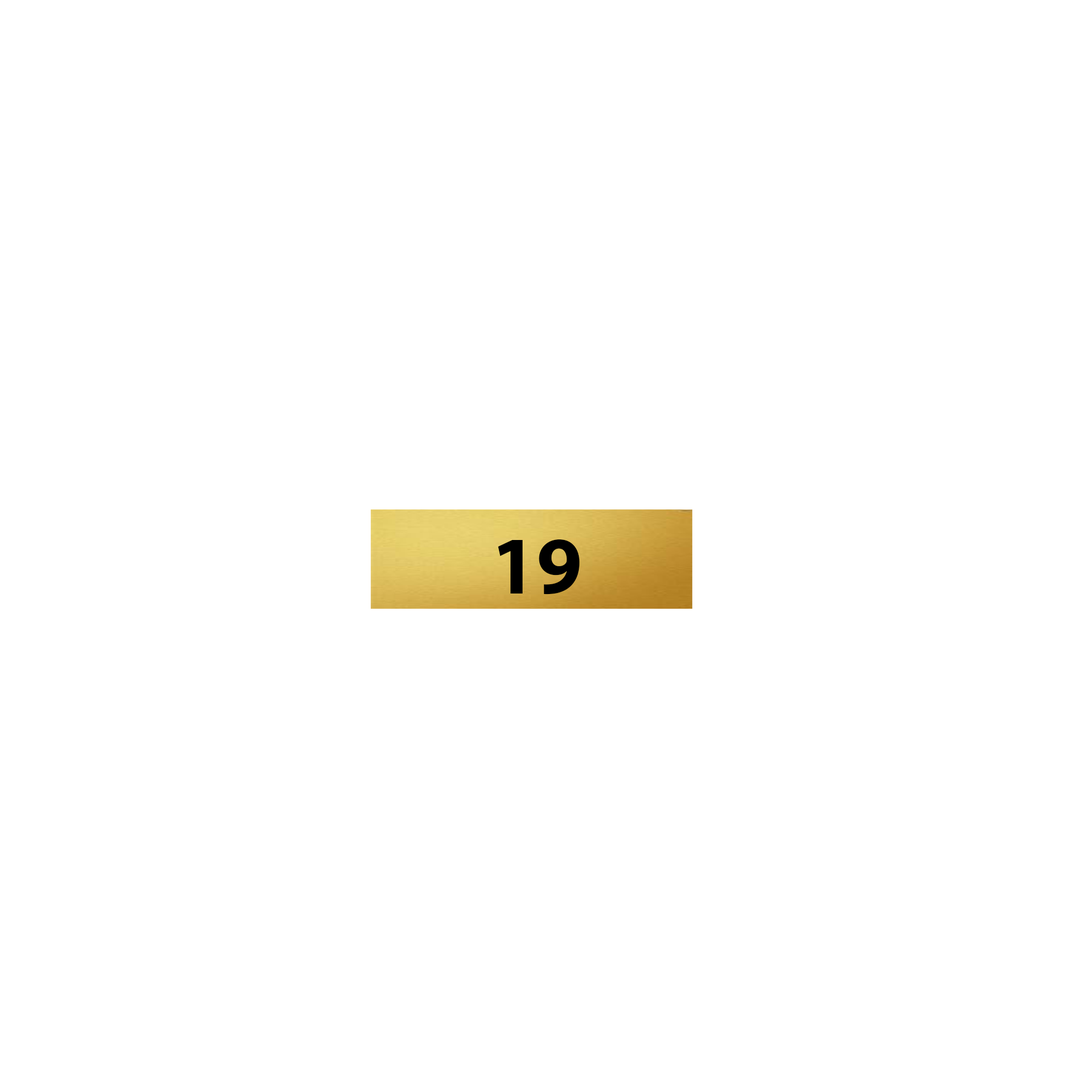
<style>
.page{position:relative;width:1092px;height:1092px;background:#ffffff}
.page>*{position:absolute;margin:0}
.t1{font:81.9px "MyriadPro-Bold";color:#000000}
</style>
<div class="page">
<p class="t1" style="left:498px;top:539px;width:82px;height:56px">19</p>
</div>
